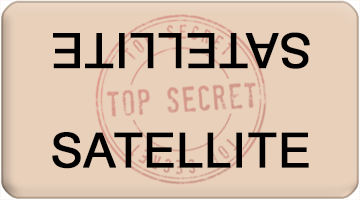
<style>
.page{position:relative;width:360px;height:200px;background:#e8d0bb}
.page>*{position:absolute;margin:0}
.t1{font:48px "ArialMT";color:#000000;font-weight:bold}
</style>
<div class="page">
<p class="t1" style="left:53px;top:32px;width:257px;height:37px;rotate:180deg">SATELLITE</p>
<p class="t1" style="left:52px;top:132px;width:257px;height:37px">SATELLITE</p>
</div>
